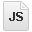
<style>
.page{position:relative;width:32px;height:32px;background:#ffffff}
.page>*{position:absolute;margin:0}
.t1{font:12px "Arial-BoldMT";color:#313131}
</style>
<div class="page">
<p class="t1" style="left:9px;top:12px;width:14px;height:9px">JS</p>
</div>
